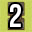
<style>
.page{position:relative;width:32px;height:32px}
.page>*{position:absolute;margin:0}
.t1{font:32.4px "BebasNeue";letter-spacing:0.04em;color:#ffffff}
</style>
<div class="page">
<p class="t1" style="left:10px;top:4px;width:11px;height:23px">2</p>
</div>
